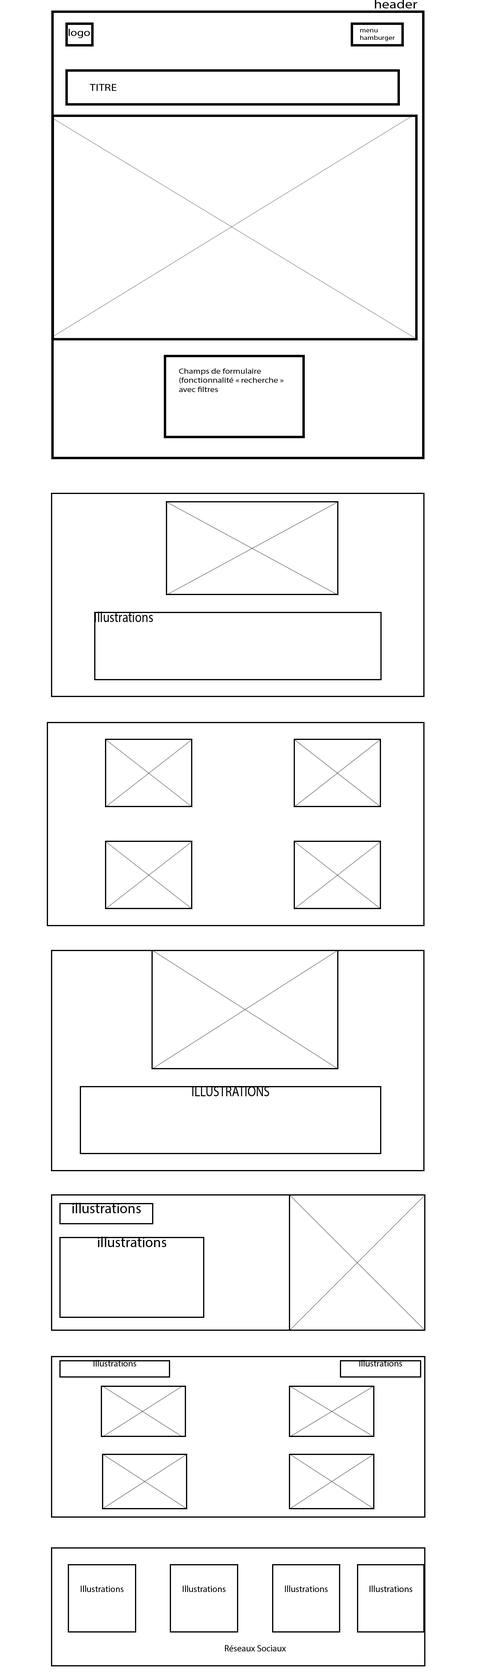
<style>
.page{position:relative;width:480px;height:1676px;background:#ffffff}
.page>*{position:absolute;margin:0}
.t1{font:12.6px "MyriadPro-Regular";color:#000000;scale:1.18 1}
.t2{font:10.1px "MyriadPro-Regular";color:#000000;scale:1.18 1}
.t3{font:6.3px "MyriadPro-Regular";color:#000000;scale:1.18 1}
.t4{font:7.5px "MyriadPro-Regular";color:#000000;scale:1.18 1}
.t5{font:14.4px "MyriadPro-Regular";color:#000000;scale:0.84 1}
.t6{font:14.4px "MyriadPro-Regular";color:#000000}
.t7{font:9px "MyriadPro-Regular";color:#000000}
</style>
<div class="page">
<p class="t1" style="left:375px;top:0px;width:42px;height:8px">header</p>
<p class="t2" style="left:69px;top:29px;width:21px;height:9px">logo</p>
<p class="t3" style="left:360px;top:29px;width:35px;height:12px">menu<br>hamburger</p>
<p class="t2" style="left:89px;top:84px;width:27px;height:7px">TITRE</p>
<p class="t4" style="left:179px;top:368px;width:105px;height:24px">Champs de formulaire<br>(fonctionnalité « recherche » <br>avec filtres</p>
<p class="t5" style="left:95px;top:612px;width:58px;height:10px">Illustrations</p>
<p class="t5" style="left:192px;top:1087px;width:77px;height:9px">ILLUSTRATIONS</p>
<p class="t6" style="left:72px;top:1203px;width:69px;height:11px">illustrations</p>
<p class="t6" style="left:98px;top:1237px;width:68px;height:10px">illustrations</p>
<p class="t7" style="left:94px;top:1360px;width:42px;height:7px">Illustrations</p>
<p class="t7" style="left:359px;top:1360px;width:43px;height:7px">Illustrations</p>
<p class="t7" style="left:81px;top:1586px;width:43px;height:6px">Illustrations</p>
<p class="t7" style="left:183px;top:1586px;width:43px;height:6px">Illustrations</p>
<p class="t7" style="left:285px;top:1586px;width:43px;height:6px">Illustrations</p>
<p class="t7" style="left:370px;top:1586px;width:42px;height:6px">Illustrations</p>
<p class="t7" style="left:225px;top:1646px;width:61px;height:6px">Réseaux Sociaux</p>
</div>
